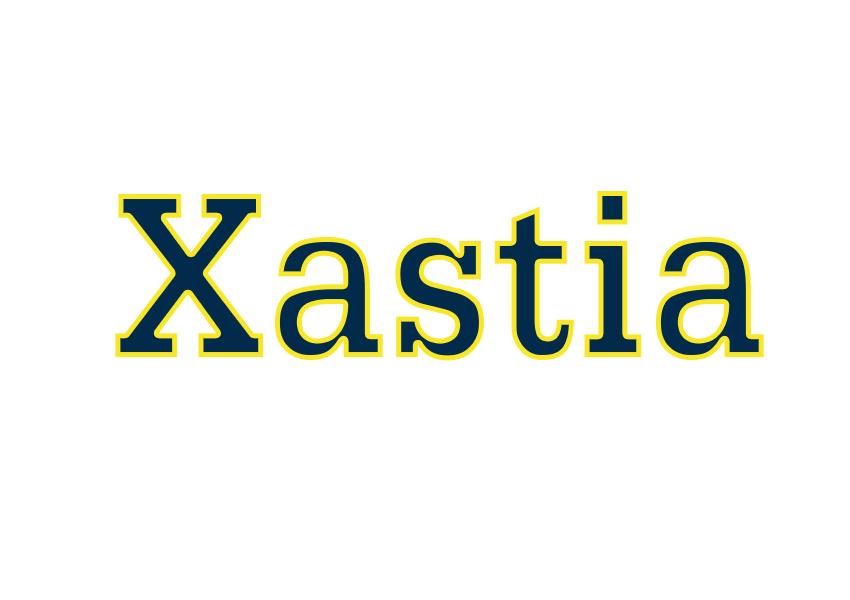
<style>
.page{position:relative;width:850px;height:600px;background:#ffffff}
.page>*{position:absolute;margin:0}
.t1{font:371.6px "DilleniaUPCBold"}
</style>
<div class="page">
<p class="t1" style="left:115px;top:191px;width:649px;height:170px">Xastia</p>
</div>
